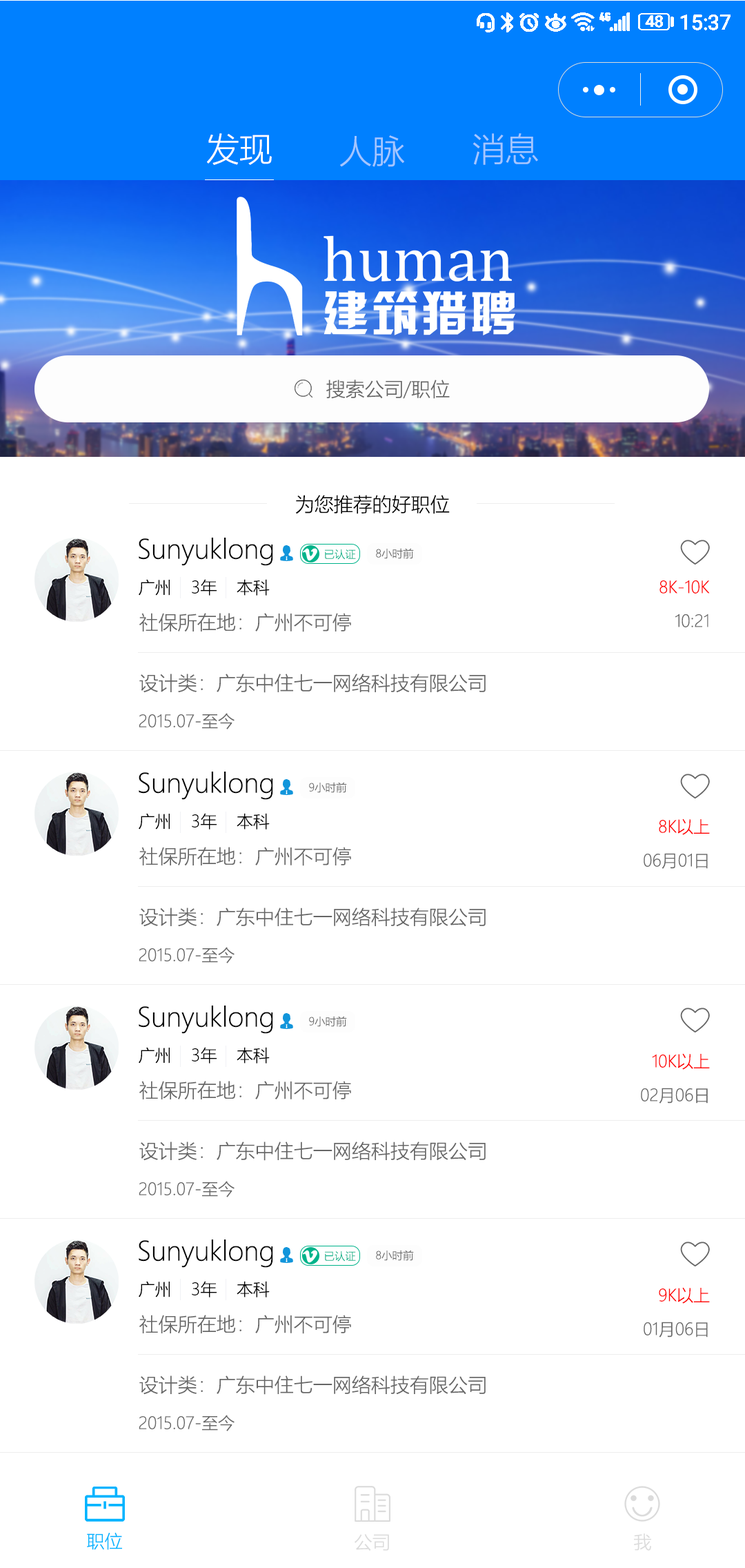
<style>
.page{position:relative;width:745px;height:1568px;background:#ffffff}
.page>*{position:absolute;margin:0}
.t1{font:33.2px "MicrosoftYaHeiLight";color:#ffffff}
.t2{font:33.2px "MicrosoftYaHeiLight";color:#a3c6ff}
.t3{font:19.4px "MicrosoftYaHeiLight";color:#666666}
.t4{font:19.4px "MicrosoftYaHeiLight";color:#000000}
.t5{font:26.2px "MicrosoftYaHeiLight";color:#040404}
.t6{font:10.7px "MicrosoftYaHeiLight";color:#00b38a}
.t7{font:10.7px "MicrosoftYaHeiLight";color:#666666}
.t8{font:16.6px "MicrosoftYaHeiLight";color:#000000}
.t9{font:16.6px "MicrosoftYaHeiLight";color:#ff0000}
.t10{font:19.3px "MicrosoftYaHeiLight";color:#666666}
.t11{font:16.6px "MicrosoftYaHeiLight";color:#666666}
.t12{font:17.9px "MicrosoftYaHeiLight";color:#00b3ff}
.t13{font:18px "MicrosoftYaHeiLight";color:#dbdbdb}
.t14{font:17.9px "MicrosoftYaHeiLight";color:#dbdbdb}
</style>
<div class="page">
<p class="t1" style="left:207px;top:133px;width:65px;height:32px">发现</p>
<p class="t2" style="left:340px;top:135px;width:64px;height:32px">人脉</p>
<p class="t2" style="left:473px;top:133px;width:65px;height:32px">消息</p>
<p class="t3" style="left:326px;top:380px;width:124px;height:19px">搜索公司/职位</p>
<p class="t4" style="left:295px;top:495px;width:155px;height:19px">为您推荐的好职位</p>
<p class="t5" style="left:139px;top:538px;width:134px;height:28px">Sunyuklong</p>
<p class="t6" style="left:325px;top:549px;width:31px;height:11px">已认证</p>
<p class="t7" style="left:376px;top:548px;width:38px;height:11px">8小时前</p>
<p class="t8" style="left:139px;top:579px;width:131px;height:17px">广州    3年    本科</p>
<p class="t9" style="left:660px;top:580px;width:50px;height:14px">8K-10K</p>
<p class="t10" style="left:139px;top:613px;width:212px;height:19px">社保所在地：广州不可停</p>
<p class="t11" style="left:676px;top:614px;width:33px;height:13px">10:21</p>
<p class="t10" style="left:139px;top:674px;width:347px;height:19px">设计类：广东中住七一网络科技有限公司</p>
<p class="t11" style="left:139px;top:713px;width:96px;height:16px">2015.07-至今</p>
<p class="t5" style="left:139px;top:772px;width:134px;height:28px">Sunyuklong</p>
<p class="t7" style="left:309px;top:782px;width:38px;height:11px">9小时前</p>
<p class="t8" style="left:139px;top:813px;width:131px;height:17px">广州    3年    本科</p>
<p class="t9" style="left:659px;top:819px;width:51px;height:16px">8K以上</p>
<p class="t10" style="left:139px;top:847px;width:212px;height:19px">社保所在地：广州不可停</p>
<p class="t11" style="left:644px;top:853px;width:64px;height:16px">06月01日</p>
<p class="t10" style="left:139px;top:908px;width:347px;height:19px">设计类：广东中住七一网络科技有限公司</p>
<p class="t11" style="left:139px;top:947px;width:96px;height:16px">2015.07-至今</p>
<p class="t5" style="left:139px;top:1006px;width:134px;height:28px">Sunyuklong</p>
<p class="t7" style="left:309px;top:1016px;width:38px;height:11px">9小时前</p>
<p class="t8" style="left:139px;top:1047px;width:131px;height:17px">广州    3年    本科</p>
<p class="t9" style="left:652px;top:1053px;width:58px;height:17px">10K以上</p>
<p class="t10" style="left:139px;top:1081px;width:212px;height:19px">社保所在地：广州不可停</p>
<p class="t11" style="left:641px;top:1088px;width:67px;height:16px">02月06日</p>
<p class="t10" style="left:139px;top:1141px;width:347px;height:20px">设计类：广东中住七一网络科技有限公司</p>
<p class="t11" style="left:139px;top:1181px;width:96px;height:16px">2015.07-至今</p>
<p class="t5" style="left:139px;top:1239px;width:134px;height:29px">Sunyuklong</p>
<p class="t6" style="left:325px;top:1251px;width:31px;height:11px">已认证</p>
<p class="t7" style="left:376px;top:1250px;width:38px;height:11px">8小时前</p>
<p class="t8" style="left:139px;top:1281px;width:131px;height:16px">广州    3年    本科</p>
<p class="t9" style="left:659px;top:1287px;width:51px;height:17px">9K以上</p>
<p class="t10" style="left:139px;top:1315px;width:212px;height:19px">社保所在地：广州不可停</p>
<p class="t11" style="left:644px;top:1322px;width:64px;height:15px">01月06日</p>
<p class="t10" style="left:139px;top:1375px;width:347px;height:20px">设计类：广东中住七一网络科技有限公司</p>
<p class="t11" style="left:139px;top:1415px;width:96px;height:16px">2015.07-至今</p>
<p class="t12" style="left:87px;top:1532px;width:35px;height:18px">职位</p>
<p class="t13" style="left:355px;top:1534px;width:34px;height:17px">公司</p>
<p class="t14" style="left:634px;top:1533px;width:17px;height:18px">我</p>
</div>
